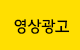
<style>
.page{position:relative;width:80px;height:50px;background:#ffdf01}
.page>*{position:absolute;margin:0}
.t1{font:15.3px "THEJung150";letter-spacing:-0.05em;color:#000000}
</style>
<div class="page">
<p class="t1" style="left:14px;top:19px;width:56px;height:15px">영상광고</p>
</div>
